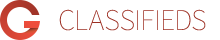
<style>
.page{position:relative;width:220px;height:40px;background:#ffffff}
.page>*{position:absolute;margin:0}
.t1{font:30px "SourceSansPro-ExtraLight";color:#9d3024;text-transform:uppercase}
</style>
<div class="page">
<p class="t1" style="left:59px;top:9px;width:147px;height:22px">CLASSIFIEDS</p>
</div>
